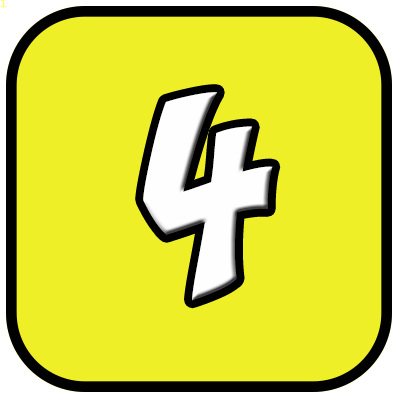
<style>
.page{position:relative;width:400px;height:400px;background:#efef28}
.page>*{position:absolute;margin:0}
.t1{font:10.7px "LucidaConsole";color:#ffff66}
.t2{font:240px "Yikes";color:#fefefe}
</style>
<div class="page">
<p class="t1" style="left:0px;top:0px;width:7px;height:8px">1</p>
<p class="t2" style="left:143px;top:92px;width:130px;height:209px">4</p>
</div>
